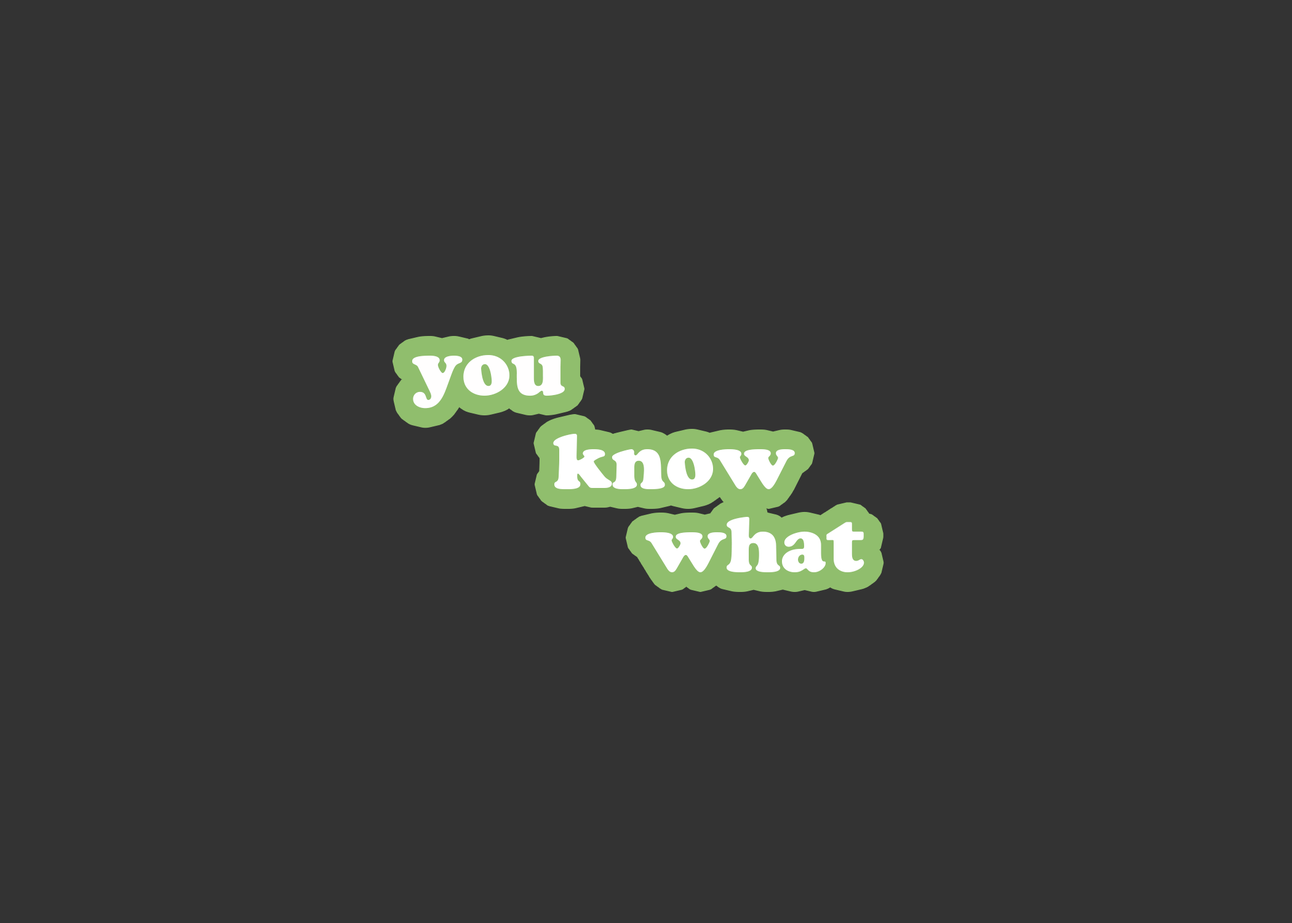
<style>
.page{position:relative;width:1292px;height:923px;background:#333333}
.page>*{position:absolute;margin:0}
.t1{font:76.9px "CooperBlackStd";color:#fffefe}
.t2{font:76.9px "CooperBlackStd";color:#ffffff}
</style>
<div class="page">
<p class="t1" style="left:412px;top:355px;width:153px;height:54px">you</p>
<p class="t2" style="left:553px;top:434px;width:242px;height:55px">know</p>
<p class="t2" style="left:645px;top:517px;width:219px;height:55px">what</p>
</div>
